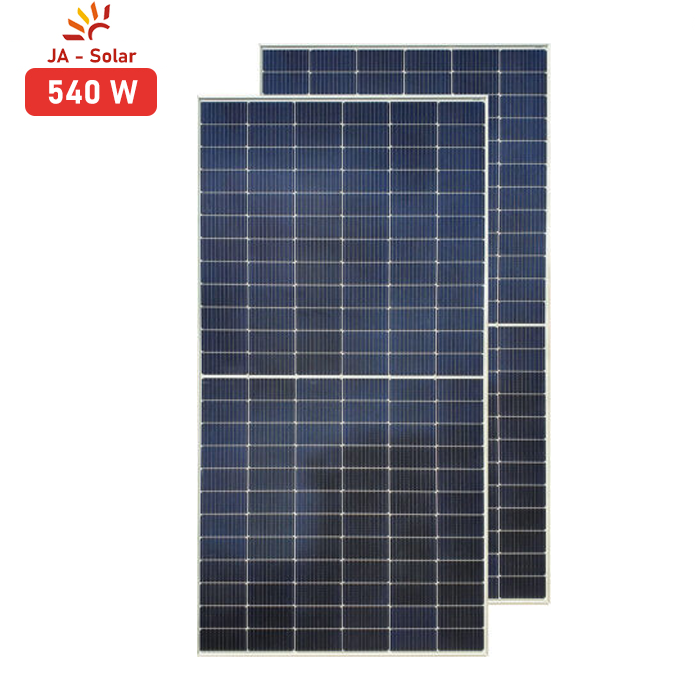
<style>
.page{position:relative;width:700px;height:700px;background:#ffffff}
.page>*{position:absolute;margin:0}
.t1{font:19.7px "Bahnschrift-Bold";color:#bd1d11}
.t2{font:32.7px "Bahnschrift-Bold";color:#ffffff}
</style>
<div class="page">
<p class="t1" style="left:47px;top:48px;width:90px;height:15px">JA - Solar</p>
<p class="t2" style="left:48px;top:80px;width:90px;height:24px">540 W</p>
</div>
